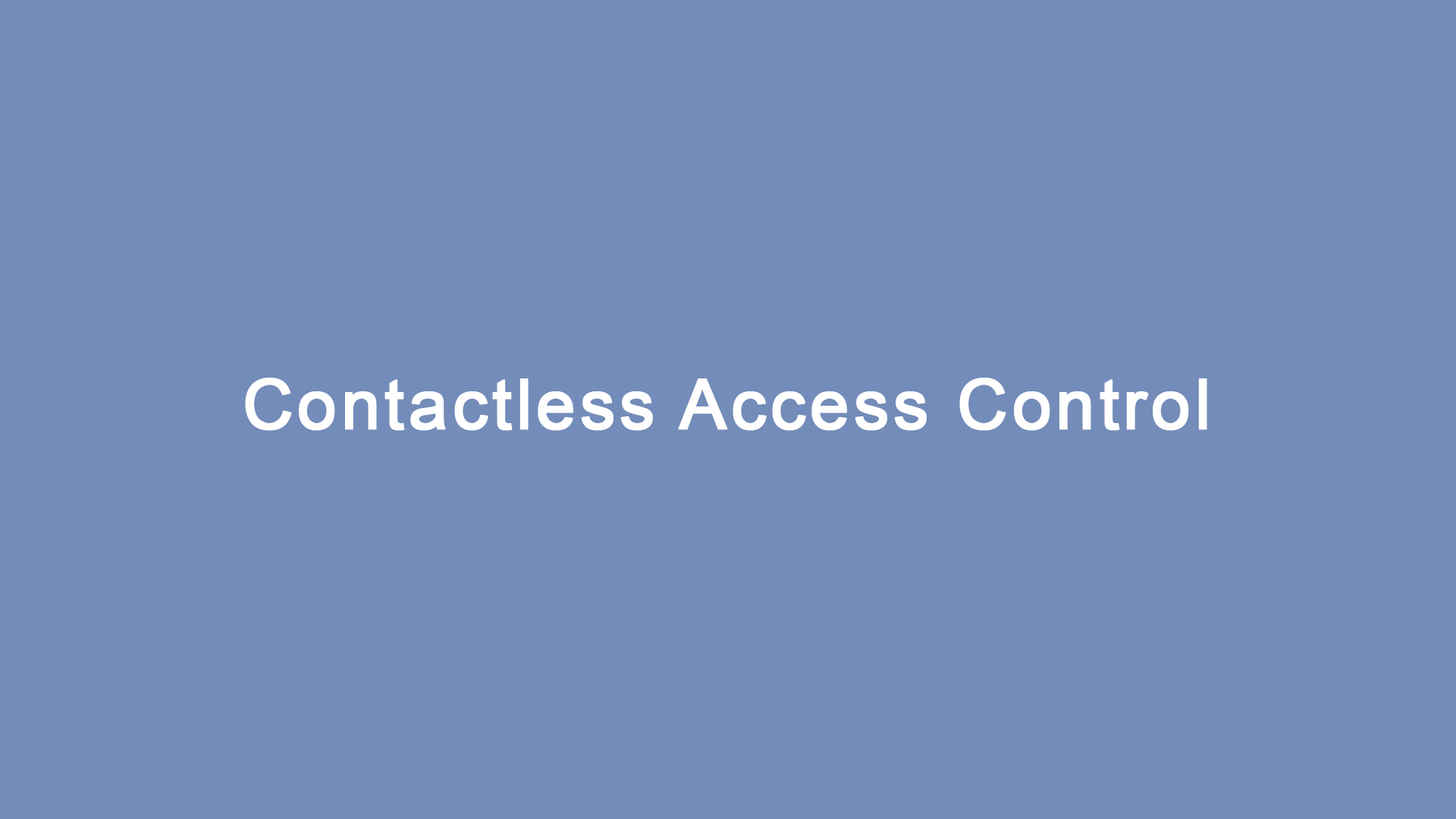
<style>
.page{position:relative;width:1456px;height:819px;background:#738cb9}
.page>*{position:absolute;margin:0}
.t1{font:69.9px "ArialMT";letter-spacing:0.04em;color:#ffffff;font-weight:bold}
</style>
<div class="page">
<p class="t1" style="left:245px;top:378px;width:962px;height:53px">Contactless Access Control</p>
</div>
